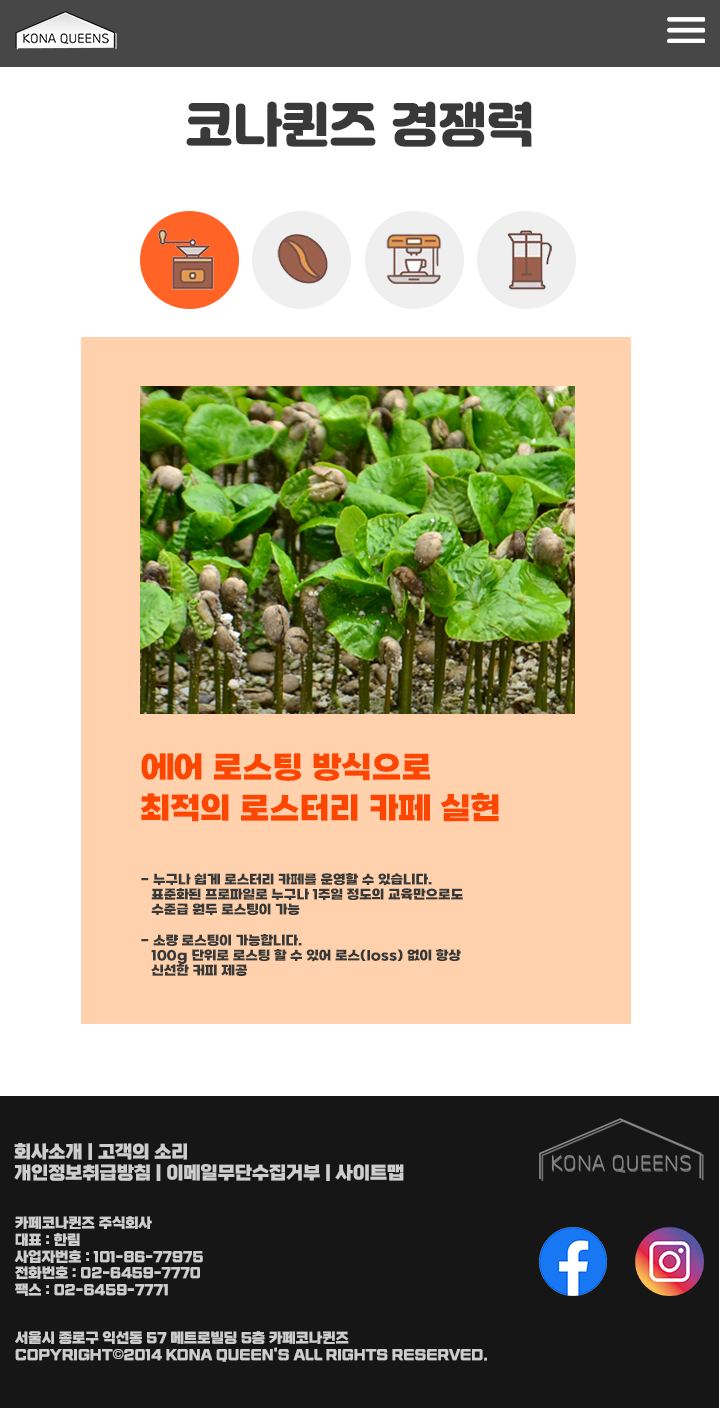
<style>
.page{position:relative;width:720px;height:1408px;background:#ffffff}
.page>*{position:absolute;margin:0}
.t1{font:48px "Jalnan";color:#393939}
.t2{font:31.3px/41.3px "SBAggroB";color:#fd4700}
.t3{font:13.1px/15.2px "SBAggroB";color:#383838}
.t4{font:18px "esamanruBold";color:#cdcdcd}
.t5{font:14px "esamanruBold";color:#cdcdcd}
.t6{font:14px "Gulim";color:#cdcdcd}
</style>
<div class="page">
<p class="t1" style="left:186px;top:101px;width:346px;height:46px">코나퀸즈 경쟁력</p>
<p class="t2" style="left:141px;top:753px;width:358px;height:69px">에어 로스팅 방식으로<br>최적의 로스터리 카페 실현</p>
<p class="t3" style="left:141px;top:873px;width:322px;height:103px">- 누구나 쉽게 로스터리 카페를 운영할 수 있습니다.<br>   표준화된 프로파일로 누구나 1주일 정도의 교육만으로도      수준급 원두 로스팅이 가능<br><br>- 소량 로스팅이 가능합니다.<br>   100g 단위로 로스팅 할 수 있어 로스(loss) 없이 항상      신선한 커피 제공</p>
<p class="t4" style="left:14px;top:1143px;width:390px;height:38px">회사소개 | 고객의 소리 <br>개인정보취급방침 | 이메일무단수집거부 | 사이트맵</p>
<p class="t5" style="left:14px;top:1216px;width:473px;height:146px">카페코나퀸즈 주식회사   <br>대표 : 한림   <br>사업자번호 : 101-86-77975  <br>전화번호 : 02-6459-7770   <br>팩스 : 02-6459-7771<br><br><br>서울시 종로구 익선동 57 메트로빌딩 5층 카페코나퀸즈<br>COPYRIGHT<span class="t6">©</span>2014 KONA QUEEN'S ALL RIGHTS RESERVED.</p>
</div>
